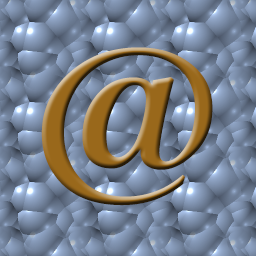
<style>
.page{position:relative;width:256px;height:256px}
.page>*{position:absolute;margin:0}
.t1{font:250px "PalatinoLinotype-Bold"}
</style>
<div class="page">
<p class="t1" style="left:41px;top:47px;width:172px;height:159px">@</p>
</div>
